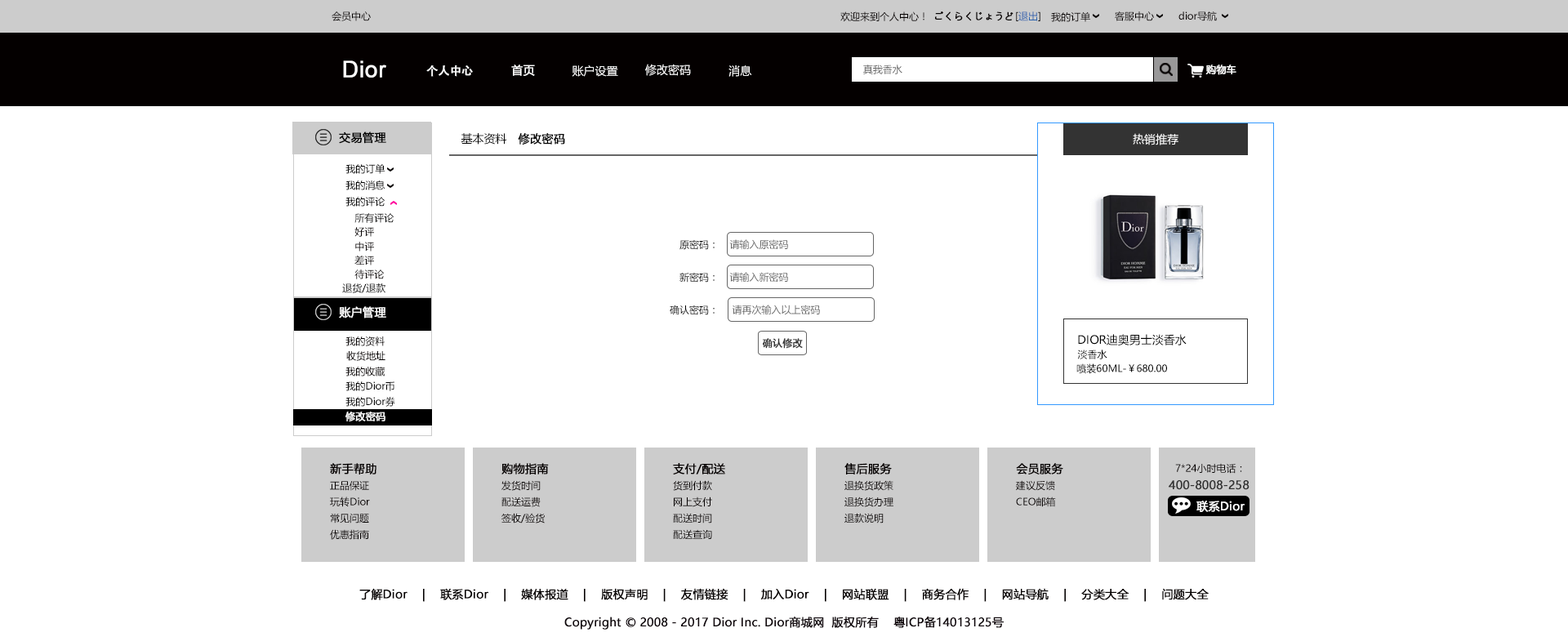
<style>
.page{position:relative;width:1568px;height:637px;background:#ffffff}
.page>*{position:absolute;margin:0}
.t1{font:9.8px "MicrosoftYaHei";color:#040000}
.t2{font:9.8px "MicrosoftYaHei";color:#040000;font-weight:bold}
.t3{font:9.8px "MicrosoftYaHei";color:#2a62ae}
.t4{font:22.9px "ArialMT";color:#ffffff;font-weight:bold}
.t5{font:11.4px "AdobeHeitiStd-Regular";color:#ffffff;font-weight:bold}
.t6{font:11.4px "MicrosoftYaHei";color:#ffffff;font-weight:bold}
.t7{font:11.4px "MicrosoftYaHei";color:#ffffff}
.t8{font:9.8px "MicrosoftYaHei";color:#666666}
.t9{font:9.8px "MicrosoftYaHei";color:#ffffff;font-weight:bold}
.t10{font:11.4px "MicrosoftYaHei";color:#000000;font-weight:bold}
.t11{font:11.4px "MicrosoftYaHei";color:#000000}
.t12{font:9.8px "MicrosoftYaHei";color:#000000}
.t13{font:9.8px "MicrosoftYaHei";color:#333333;font-weight:bold}
.t14{font:11.4px "MicrosoftYaHei";color:#040000;font-weight:bold}
.t15{font:11.4px "MicrosoftYaHei";color:#333333;font-weight:bold}
</style>
<div class="page">
<p class="t1" style="left:332px;top:11px;width:39px;height:10px">会员中心</p>
<p class="t1" style="left:840px;top:11px;width:84px;height:11px">欢迎来到个人中心！</p>
<p class="t2" style="left:935px;top:11px;width:78px;height:10px">ごくらくじょうど</p>
<p class="t3" style="left:1016px;top:11px;width:24px;height:10px"><span class="t1">[</span>退出<span class="t1">]</span></p>
<p class="t1" style="left:1051px;top:11px;width:39px;height:11px">我的订单</p>
<p class="t1" style="left:1115px;top:11px;width:39px;height:10px">客服中心</p>
<p class="t1" style="left:1178px;top:11px;width:39px;height:10px">dior导航</p>
<p class="t4" style="left:343px;top:60px;width:43px;height:18px">Dior</p>
<p class="t5" style="left:426px;top:65px;width:47px;height:12px">个人中心</p>
<p class="t6" style="left:511px;top:65px;width:24px;height:11px">首页</p>
<p class="t7" style="left:572px;top:65px;width:46px;height:12px">账户设置</p>
<p class="t7" style="left:645px;top:64px;width:46px;height:12px">修改密码</p>
<p class="t7" style="left:728px;top:65px;width:24px;height:12px">消息</p>
<p class="t8" style="left:863px;top:65px;width:39px;height:9px">真我香水</p>
<p class="t9" style="left:1205px;top:65px;width:31px;height:10px">购物车</p>
<p class="t10" style="left:339px;top:131px;width:47px;height:13px">交易管理</p>
<p class="t11" style="left:461px;top:133px;width:46px;height:12px">基本资料</p>
<p class="t10" style="left:518px;top:133px;width:47px;height:12px">修改密码</p>
<p class="t7" style="left:1133px;top:133px;width:45px;height:12px">热销推荐</p>
<p class="t12" style="left:345px;top:163px;width:40px;height:11px">我的订单</p>
<p class="t12" style="left:345px;top:180px;width:40px;height:10px">我的消息</p>
<p class="t12" style="left:345px;top:197px;width:40px;height:10px">我的评论</p>
<p class="t12" style="left:354px;top:213px;width:40px;height:10px">所有评论</p>
<p class="t1" style="left:354px;top:227px;width:20px;height:10px">好评</p>
<p class="t1" style="left:355px;top:242px;width:19px;height:10px">中评</p>
<p class="t12" style="left:679px;top:239px;width:36px;height:11px">原密码：</p>
<p class="t8" style="left:729px;top:239px;width:59px;height:11px">请输入原密码</p>
<p class="t1" style="left:354px;top:255px;width:20px;height:10px">差评</p>
<p class="t1" style="left:354px;top:270px;width:31px;height:9px">待评论</p>
<p class="t12" style="left:679px;top:272px;width:36px;height:11px">新密码：</p>
<p class="t8" style="left:729px;top:272px;width:59px;height:11px">请输入新密码</p>
<p class="t12" style="left:342px;top:283px;width:43px;height:10px">退货/退款</p>
<p class="t12" style="left:670px;top:305px;width:45px;height:10px">确认密码：</p>
<p class="t8" style="left:732px;top:305px;width:88px;height:10px">请再次输入以上密码</p>
<p class="t6" style="left:339px;top:306px;width:47px;height:12px">账户管理</p>
<p class="t1" style="left:345px;top:336px;width:40px;height:10px">我的资料</p>
<p class="t13" style="left:762px;top:338px;width:41px;height:11px">确认修改</p>
<p class="t11" style="left:1078px;top:334px;width:109px;height:11px">DIOR迪奥男士淡香水</p>
<p class="t1" style="left:346px;top:351px;width:39px;height:10px">收货地址</p>
<p class="t12" style="left:1077px;top:350px;width:30px;height:9px">淡香水</p>
<p class="t12" style="left:1076px;top:363px;width:91px;height:11px">喷装60ML-￥680.00</p>
<p class="t1" style="left:345px;top:367px;width:40px;height:9px">我的收藏</p>
<p class="t12" style="left:345px;top:381px;width:49px;height:10px">我的Dior币</p>
<p class="t12" style="left:345px;top:397px;width:50px;height:10px">我的Dior券</p>
<p class="t9" style="left:345px;top:412px;width:40px;height:9px">修改密码</p>
<p class="t14" style="left:330px;top:463px;width:46px;height:11px">新手帮助</p>
<p class="t14" style="left:501px;top:463px;width:48px;height:11px">购物指南</p>
<p class="t14" style="left:673px;top:463px;width:52px;height:11px">支付/配送</p>
<p class="t14" style="left:844px;top:463px;width:48px;height:11px">售后服务</p>
<p class="t14" style="left:1016px;top:463px;width:47px;height:11px">会员服务</p>
<p class="t1" style="left:1175px;top:463px;width:67px;height:11px">7*24小时电话：</p>
<p class="t1" style="left:330px;top:481px;width:39px;height:10px">正品保证</p>
<p class="t1" style="left:501px;top:480px;width:40px;height:11px">发货时间</p>
<p class="t1" style="left:673px;top:480px;width:39px;height:11px">货到付款</p>
<p class="t1" style="left:844px;top:480px;width:49px;height:11px">退换货政策</p>
<p class="t1" style="left:1016px;top:480px;width:39px;height:11px">建议反馈</p>
<p class="t15" style="left:1169px;top:480px;width:81px;height:10px">400-8008-258</p>
<p class="t1" style="left:330px;top:497px;width:40px;height:10px">玩转Dior</p>
<p class="t1" style="left:501px;top:497px;width:40px;height:10px">配送运费</p>
<p class="t1" style="left:674px;top:497px;width:38px;height:10px">网上支付</p>
<p class="t1" style="left:844px;top:497px;width:49px;height:10px">退换货办理</p>
<p class="t1" style="left:1016px;top:497px;width:40px;height:10px">CEO邮箱</p>
<p class="t6" style="left:1196px;top:501px;width:49px;height:11px">联系Dior</p>
<p class="t1" style="left:330px;top:513px;width:39px;height:10px">常见问题</p>
<p class="t1" style="left:501px;top:513px;width:44px;height:10px">签收/验货</p>
<p class="t1" style="left:673px;top:513px;width:39px;height:10px">配送时间</p>
<p class="t1" style="left:844px;top:513px;width:40px;height:10px">退款说明</p>
<p class="t1" style="left:330px;top:529px;width:39px;height:11px">优惠指南</p>
<p class="t1" style="left:673px;top:529px;width:39px;height:10px">配送查询</p>
<p class="t14" style="left:359px;top:588px;width:850px;height:14px">了解Dior    |    联系Dior    |    媒体报道    |    版权声明    |    友情链接    |    加入Dior    |    网站联盟    |    商务合作    |    网站导航    |    分类大全    |    问题大全</p>
<p class="t10" style="left:564px;top:616px;width:440px;height:14px">Copyright © 2008 - 2017 Dior Inc. Dior商城网  版权所有    粤ICP备14013125号</p>
</div>
